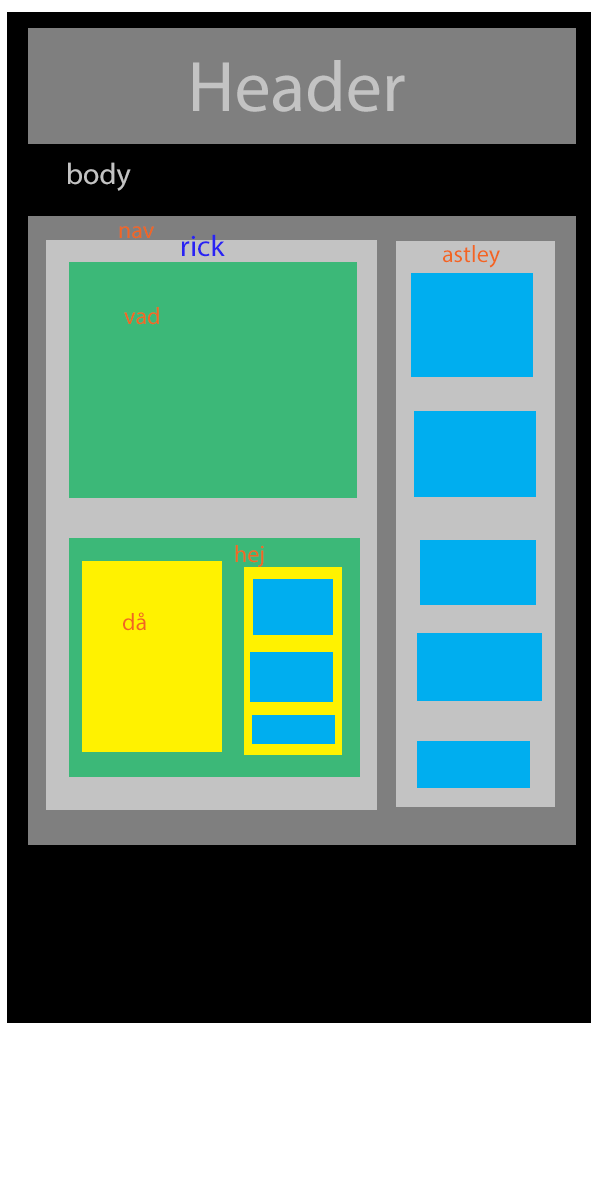
<style>
.page{position:relative;width:600px;height:1200px;background:#000000}
.page>*{position:absolute;margin:0}
.t1{font:72px "MyriadPro-Regular";color:#c3c3c3}
.t2{font:30px "MyriadPro-Regular";color:#c3c3c3}
.t3{font:24px "MyriadPro-Regular";color:#f26522}
.t4{font:30px "MyriadPro-Regular";color:#2922f2}
</style>
<div class="page">
<p class="t1" style="left:193px;top:60px;width:212px;height:52px">Header</p>
<p class="t2" style="left:68px;top:162px;width:63px;height:29px">body</p>
<p class="t3" style="left:119px;top:226px;width:35px;height:13px">nav</p>
<p class="t4" style="left:182px;top:234px;width:43px;height:23px">rick</p>
<p class="t3" style="left:443px;top:245px;width:57px;height:23px">astley</p>
<p class="t3" style="left:124px;top:307px;width:35px;height:18px">vad</p>
<p class="t3" style="left:235px;top:545px;width:29px;height:22px">hej</p>
<p class="t3" style="left:123px;top:612px;width:23px;height:19px">då</p>
</div>
